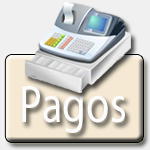
<style>
.page{position:relative;width:150px;height:150px}
.page>*{position:absolute;margin:0}
.t1{font:53px "MyriadPro-Regular";color:#fcfcfc;scale:0.8 1}
</style>
<div class="page">
<p class="t1" style="left:22px;top:86px;width:103px;height:47px">Pagos</p>
</div>
